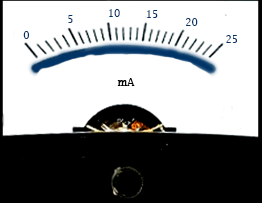
<style>
.page{position:relative;width:262px;height:203px;background:#ffffff}
.page>*{position:absolute;margin:0}
.t1{font:10px "LucidaFax";color:#003366}
</style>
<div class="page">
<p class="t1" style="left:68px;top:15px;width:5px;height:8px">5</p>
<p class="t1" style="left:109px;top:9px;width:11px;height:8px">10</p>
<p class="t1" style="left:147px;top:10px;width:11px;height:8px">15</p>
<p class="t1" style="left:186px;top:18px;width:12px;height:8px">20</p>
<p class="t1" style="left:23px;top:31px;width:6px;height:8px">0</p>
<p class="t1" style="left:226px;top:35px;width:11px;height:8px">25</p>
</div>
